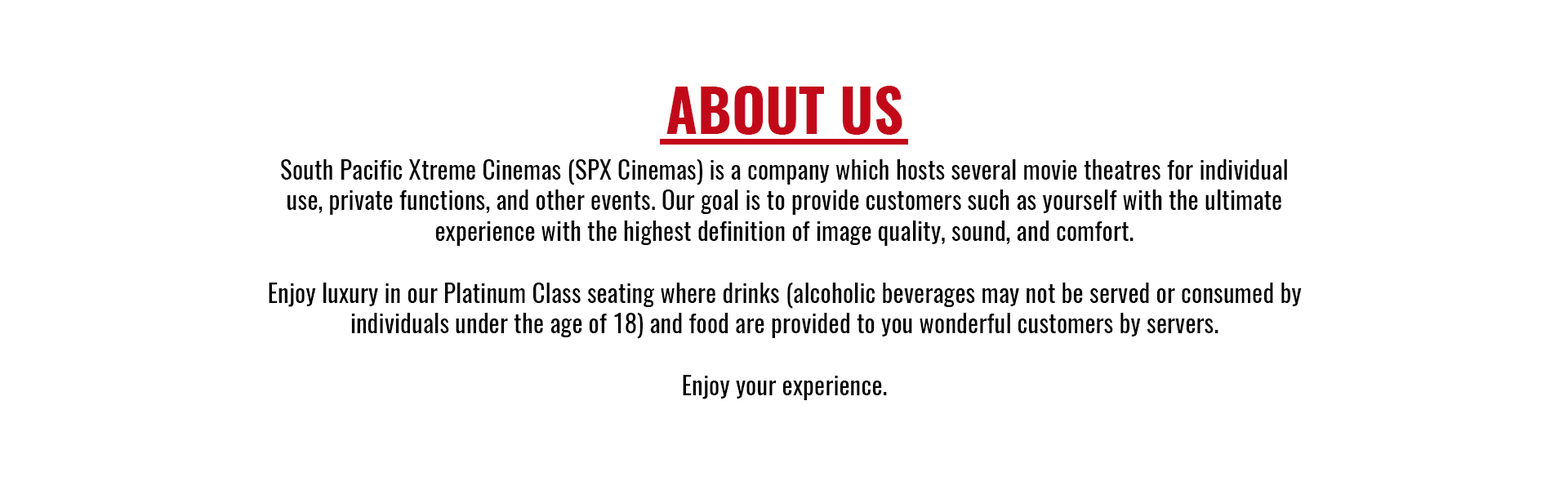
<style>
.page{position:relative;width:1568px;height:490px;background:#ffffff}
.page>*{position:absolute;margin:0}
.t1{font:57.8px "Oswald-Bold";color:#c2091a}
.t2{font:25.7px "Oswald-Regular";color:#000000}
</style>
<div class="page">
<p class="t1" style="left:666px;top:86px;width:236px;height:49px">ABOUT US</p>
<p class="t2" style="left:269px;top:159px;width:1033px;height:241px;text-align:center">South Pacific Xtreme Cinemas (SPX Cinemas) is a company which hosts several movie theatres for individual use, private functions, and other events. Our goal is to provide customers such as yourself with the ultimate experience with the highest definition of image quality, sound, and comfort.<br><br>Enjoy luxury in our Platinum Class seating where drinks (alcoholic beverages may not be served or consumed by individuals under the age of 18) and food are provided to you wonderful customers by servers.<br><br>Enjoy your experience.</p>
</div>
